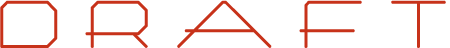
<style>
.page{position:relative;width:450px;height:48px;background:#ffffff}
.page>*{position:absolute;margin:0}
.t1{font:77px "Architext-Regular";letter-spacing:0.28em;color:#c7321a}
</style>
<div class="page">
<p class="t1" style="left:0px;top:0px;width:446px;height:48px">DRAFT</p>
</div>
